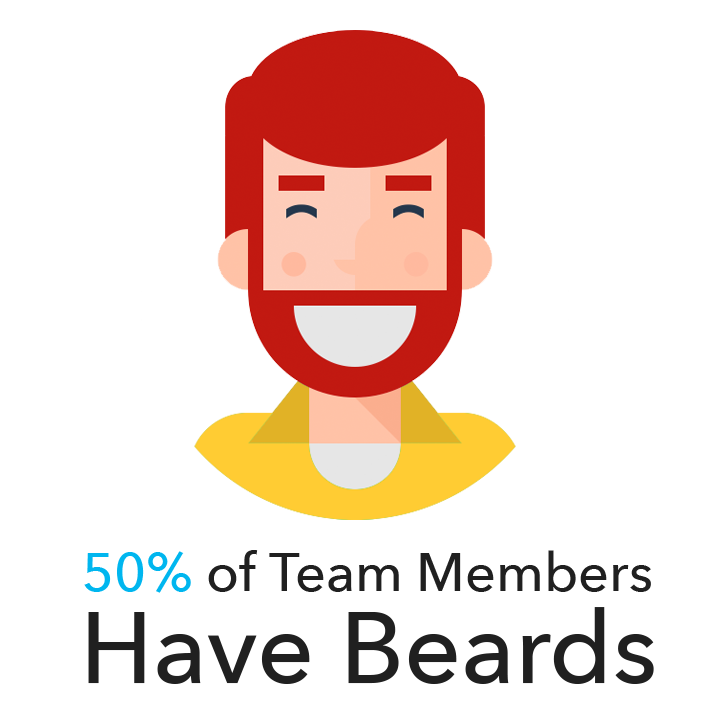
<style>
.page{position:relative;width:720px;height:720px;background:#ffffff}
.page>*{position:absolute;margin:0}
.t1{font:54px "AvenirNext-Medium";color:#202020}
.t2{font:54px "AvenirNext-Medium";color:#00b6ef}
.t3{font:100px "AvenirNext-Medium";color:#202020}
</style>
<div class="page">
<p class="t1" style="left:84px;top:550px;width:567px;height:43px"><span class="t2">50% </span>of Team Members</p>
<p class="t3" style="left:88px;top:607px;width:566px;height:77px">Have Beards</p>
</div>
